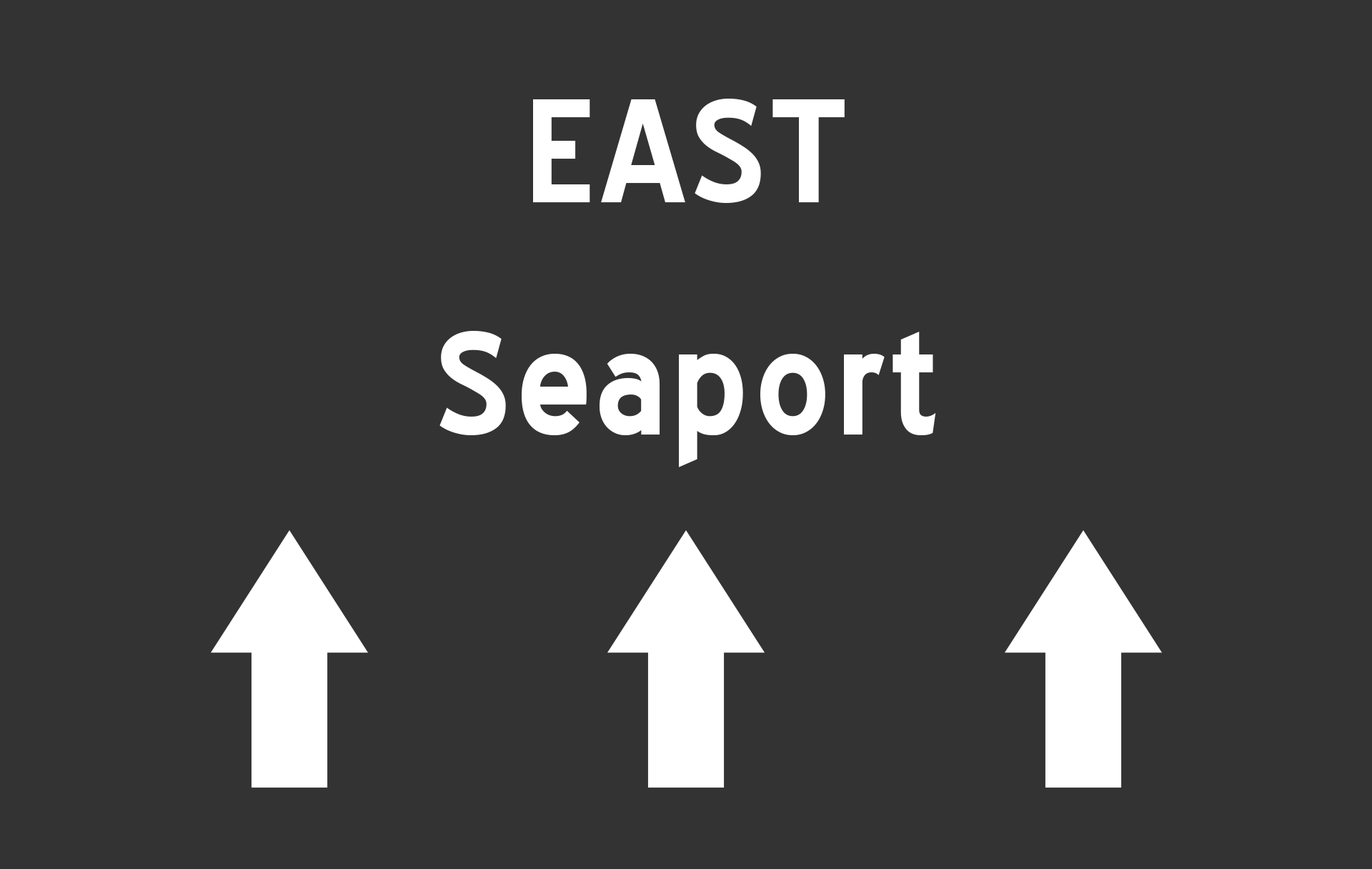
<style>
.page{position:relative;width:1372px;height:869px;background:#333333}
.page>*{position:absolute;margin:0}
.t1{font:142.9px "BlueHighway-Bold";letter-spacing:0.02em;color:#ffffff}
</style>
<div class="page">
<p class="t1" style="left:533px;top:99px;width:312px;height:104px">EAST</p>
<p class="t1" style="left:440px;top:331px;width:496px;height:136px">Seaport</p>
</div>
